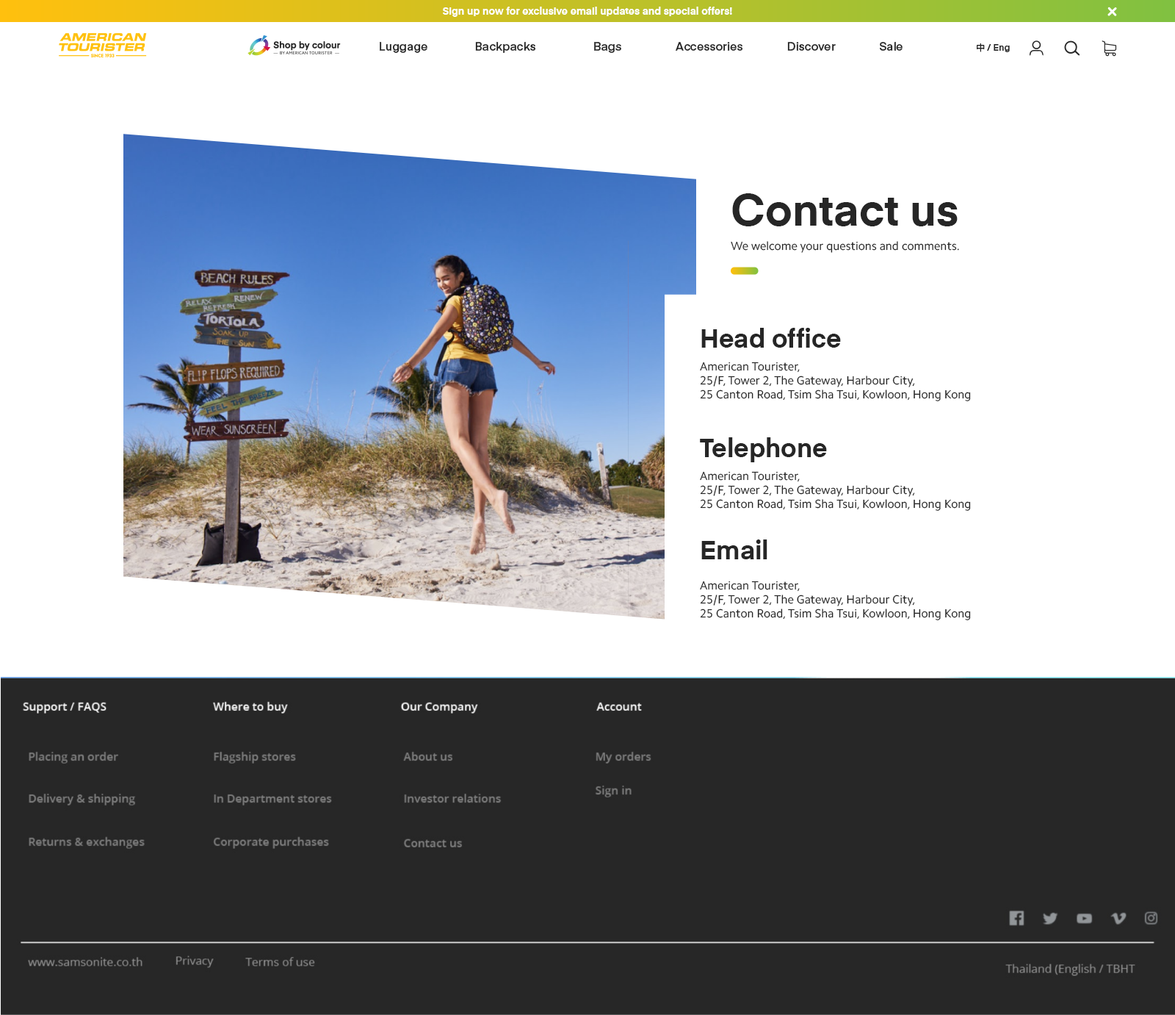
<style>
.page{position:relative;width:1175px;height:1015px;background:#ffffff}
.page>*{position:absolute;margin:0}
.t1{font:10.3px "Eina01-Bold";color:#ffffff}
.t2{font:11.8px "Eina01-SemiBold";color:#272727}
.t3{font:8.8px "Eina01-SemiBold";color:#272727}
.t4{font:8.8px "NotoSansTC-Regular";color:#272727}
.t5{font:44.1px "Eina01-Bold";color:#272727}
.t6{font:11.8px "CamphorW01-Regular";color:#262626}
.t7{font:25.7px "Eina01-Bold";color:#272727}
.t8{font:11.8px "CamphorW01-Regular";color:#272727}
</style>
<div class="page">
<p class="t1" style="left:443px;top:7px;width:289px;height:10px">Sign up now for exclusive email updates and special offers!</p>
<p class="t2" style="left:380px;top:42px;width:48px;height:11px">Luggage</p>
<p class="t2" style="left:475px;top:42px;width:61px;height:11px">Backpacks</p>
<p class="t2" style="left:594px;top:42px;width:27px;height:11px">Bags</p>
<p class="t2" style="left:676px;top:42px;width:67px;height:9px">Accessories</p>
<p class="t2" style="left:788px;top:42px;width:48px;height:9px">Discover</p>
<p class="t2" style="left:879px;top:42px;width:24px;height:9px">Sale</p>
<p class="t3" style="left:977px;top:43px;width:33px;height:9px"><span class="t4">中 </span>/ Eng</p>
<p class="t5" style="left:732px;top:193px;width:226px;height:33px">Contact us</p>
<p class="t6" style="left:731px;top:241px;width:228px;height:12px">We welcome your questions and comments.</p>
<p class="t7" style="left:702px;top:328px;width:139px;height:19px">Head office</p>
<p class="t8" style="left:700px;top:361px;width:271px;height:40px">American Tourister,<br>25/F, Tower 2, The Gateway, Harbour City,<br>25 Canton Road, Tsim Sha Tsui, Kowloon, Hong Kong</p>
<p class="t7" style="left:700px;top:437px;width:127px;height:25px">Telephone</p>
<p class="t8" style="left:700px;top:471px;width:271px;height:40px">American Tourister,<br>25/F, Tower 2, The Gateway, Harbour City,<br>25 Canton Road, Tsim Sha Tsui, Kowloon, Hong Kong</p>
<p class="t7" style="left:702px;top:539px;width:66px;height:20px">Email</p>
<p class="t8" style="left:700px;top:580px;width:271px;height:40px">American Tourister,<br>25/F, Tower 2, The Gateway, Harbour City,<br>25 Canton Road, Tsim Sha Tsui, Kowloon, Hong Kong</p>
</div>
